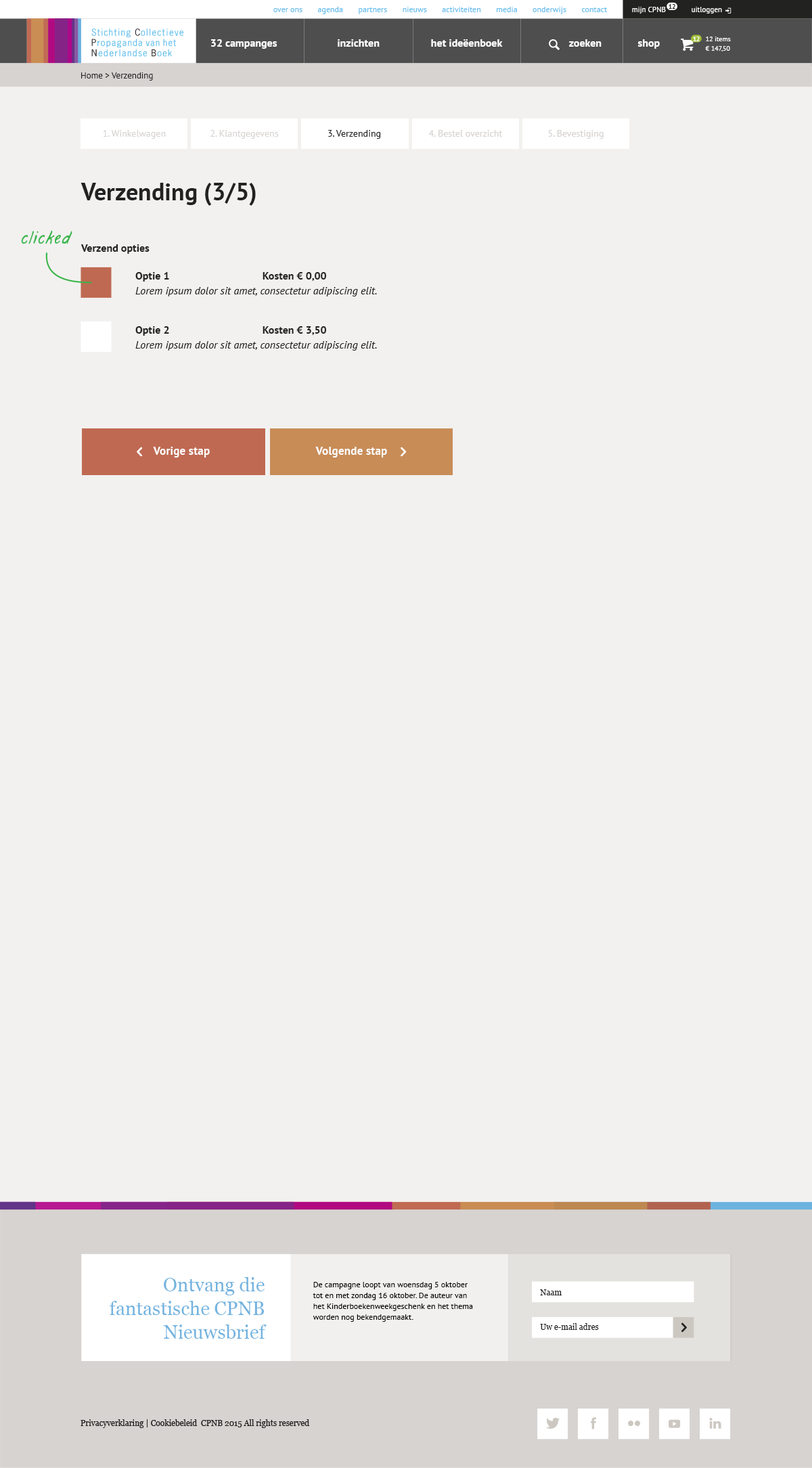
<style>
.page{position:relative;width:812px;height:1468px;background:#f2f1ef}
.page>*{position:absolute;margin:0}
.t1{font:6.8px "PTSans-Bold";letter-spacing:-0.05em;color:#222221}
.t2{font:8.1px "PTSans-Regular";color:#65bdec}
.t3{font:7.5px "PTSans-Regular";color:#ffffff}
.t4{font:10.8px "PTSans-Bold";color:#ffffff}
.t5{font:6.8px "PTSans-Bold";letter-spacing:-0.05em;color:#ffffff}
.t6{font:6.8px/9.5px "PTSans-Regular";color:#ffffff}
.t7{font:8.8px "PTSans-Regular";color:#222221}
.t8{font:9.5px "PTSans-Regular";color:#d7d3d0}
.t9{font:9.5px "PTSans-Regular";color:#222222}
.t10{font:24.4px "PTSans-Bold";color:#222222}
.t11{font:10.8px "PTSans-Bold";color:#222222}
.t12{font:10.8px "PTSans-Italic";color:#222222}
.t13{font:11.8px "PTSans-Bold";color:#ffffff}
.t14{font:19px/23.7px "Georgia";color:#5daadc}
.t15{font:8.1px/10.8px "PTSans-Regular";color:#000000}
.t16{font:8.1px "Georgia";color:#222221}
</style>
<div class="page">
<p class="t1" style="left:669px;top:4px;width:7px;height:5px">12</p>
<p class="t2" style="left:273px;top:7px;width:335px;height:7px">over ons       agenda       partners       nieuws       activiteiten       media       onderwijs       contact</p>
<p class="t3" style="left:632px;top:7px;width:34px;height:7px">mijn CPNB</p>
<p class="t3" style="left:692px;top:7px;width:30px;height:7px">uitloggen</p>
<p class="t4" style="left:211px;top:39px;width:67px;height:10px">32 campanges</p>
<p class="t4" style="left:338px;top:39px;width:42px;height:8px">inzichten</p>
<p class="t4" style="left:431px;top:39px;width:72px;height:8px">het ideëenboek</p>
<p class="t4" style="left:569px;top:39px;width:33px;height:8px">zoeken</p>
<p class="t4" style="left:638px;top:39px;width:22px;height:10px">shop</p>
<p class="t5" style="left:693px;top:37px;width:7px;height:4px">12</p>
<p class="t6" style="left:705px;top:37px;width:26px;height:14px">12 items<br>€ 147,50</p>
<p class="t7" style="left:81px;top:72px;width:72px;height:9px">Home &gt; Verzending</p>
<p class="t8" style="left:103px;top:130px;width:63px;height:9px">1. Winkelwagen</p>
<p class="t8" style="left:211px;top:130px;width:68px;height:9px">2. Klantgegevens</p>
<p class="t9" style="left:328px;top:130px;width:53px;height:9px">3. Verzending</p>
<p class="t8" style="left:428px;top:130px;width:75px;height:7px">4. Bestel overzicht</p>
<p class="t8" style="left:548px;top:130px;width:56px;height:9px">5. Bevestiging</p>
<p class="t10" style="left:81px;top:183px;width:175px;height:23px">Verzending (3/5)</p>
<p class="t11" style="left:81px;top:244px;width:69px;height:10px">Verzend opties</p>
<p class="t11" style="left:135px;top:272px;width:192px;height:10px">Optie 1 Kosten € 0,00</p>
<p class="t12" style="left:135px;top:287px;width:242px;height:9px">Lorem ipsum dolor sit amet, consectetur adipiscing elit.</p>
<p class="t11" style="left:135px;top:326px;width:192px;height:10px">Optie 2 Kosten € 3,50</p>
<p class="t12" style="left:135px;top:341px;width:242px;height:10px">Lorem ipsum dolor sit amet, consectetur adipiscing elit.</p>
<p class="t13" style="left:153px;top:447px;width:57px;height:11px">Vorige stap</p>
<p class="t13" style="left:315px;top:447px;width:72px;height:11px">Volgende stap</p>
<p class="t14" style="left:109px;top:1277px;width:158px;height:62px;text-align:right;opacity:0.9">Ontvang die<br>fantastische CPNB<br>Nieuwsbrief</p>
<p class="t15" style="left:313px;top:1282px;width:160px;height:40px">De campagne loopt van woensdag 5 oktober tot en met zondag 16 oktober. De auteur van het Kinderboekenweekgeschenk en het thema worden nog bekendgemaakt.</p>
<p class="t16" style="left:540px;top:1289px;width:22px;height:7px">Naam</p>
<p class="t16" style="left:540px;top:1323px;width:59px;height:7px">Uw e-mail adres</p>
<p class="t16" style="left:81px;top:1419px;width:229px;height:9px">Privacyverklaring | Cookiebeleid  CPNB 2015 All rights reserved</p>
</div>
